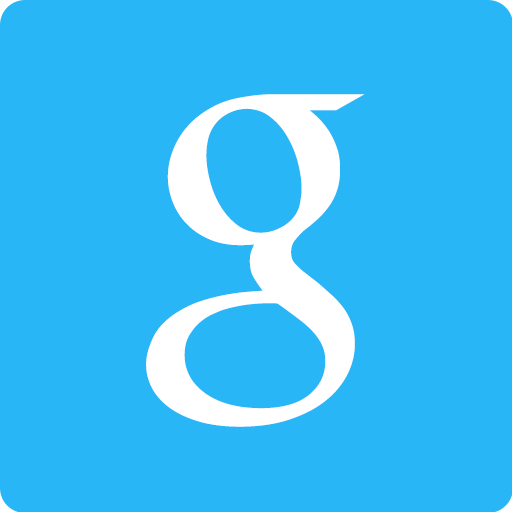
<style>
.page{position:relative;width:512px;height:512px;background:#29b6f6}
.page>*{position:absolute;margin:0}
.t1{font:436.2px "Catull-Regular";letter-spacing:-0.04em;color:#ffffff}
</style>
<div class="page">
<p class="t1" style="left:146px;top:94px;width:219px;height:333px">g</p>
</div>
